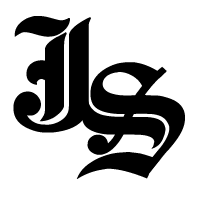
<style>
.page{position:relative;width:200px;height:200px;background:#ffffff}
.page>*{position:absolute;margin:0}
.t1{font:175px "EnglishTowne-Medium";letter-spacing:0.04em;color:#000000}
</style>
<div class="page">
<p class="t1" style="left:13px;top:16px;width:78px;height:117px">J</p>
<p class="t1" style="left:76px;top:62px;width:109px;height:117px">S</p>
</div>
